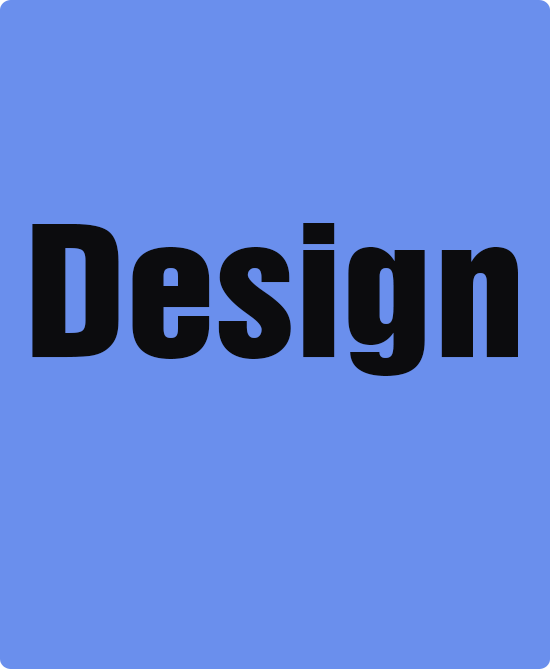
<style>
.page{position:relative;width:550px;height:670px;background:#6a8fed}
.page>*{position:absolute;margin:0}
.t1{font:166.7px "Swiss921BT-RegularA";color:#0d0d0e;scale:1.1 1}
</style>
<div class="page">
<p class="t1" style="left:32px;top:223px;width:486px;height:153px">Design</p>
</div>
